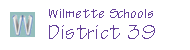
<style>
.page{position:relative;width:190px;height:50px;background:#ffffff}
.page>*{position:absolute;margin:0}
.t1{font:12px "OLIVEOIL-Normal";letter-spacing:0.075em;color:#654199}
.t2{font:18px "OLIVEOIL-Normal";letter-spacing:0.075em;color:#654199}
</style>
<div class="page">
<p class="t1" style="left:49px;top:9px;width:106px;height:30px">Wilmette Schools<br><span class="t2">District 39</span></p>
</div>
